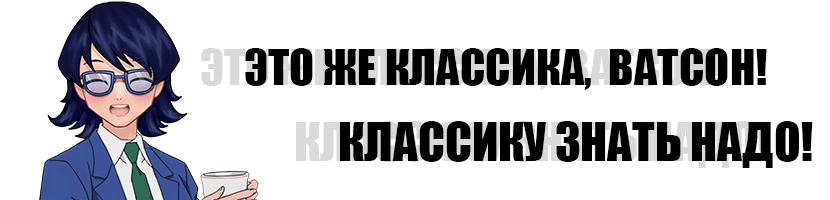
<style>
.page{position:relative;width:830px;height:200px;background:#ffffff}
.page>*{position:absolute;margin:0}
.t1{font:46.3px "Impact";color:#000000}
.t2{font:48.8px "Impact";color:#000000}
</style>
<div class="page">
<p class="t1" style="left:245px;top:48px;width:522px;height:42px">ЭТО ЖЕ КЛАССИКА,  ВАТСОН!</p>
<p class="t2" style="left:340px;top:121px;width:473px;height:47px">КЛАССИКУ ЗНАТЬ НАДО!</p>
</div>
